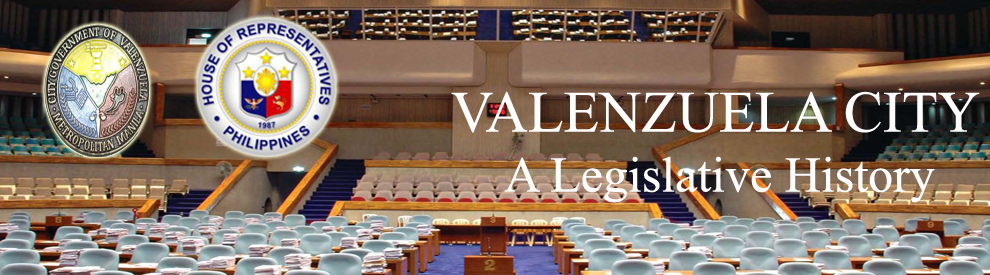
<style>
.page{position:relative;width:990px;height:275px}
.page>*{position:absolute;margin:0}
.t1{font:50px "TimesNewRomanPSMT";color:#fdfcfc}
.t2{font:58.3px "TimesNewRomanPSMT";color:#fdfdfd}
</style>
<div class="page">
<p class="t1" style="left:451px;top:91px;width:529px;height:112px;text-align:center"><span class="t2">VALENZUELA CITY<br></span>A Legislative History</p>
</div>
